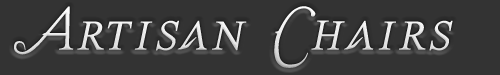
<style>
.page{position:relative;width:500px;height:75px;background:#333333}
.page>*{position:absolute;margin:0}
.t1{font:48px "TheLastFontI'mWastingOnYou-Italic";letter-spacing:0.04em;color:#e7e7e7;font-weight:bold}
</style>
<div class="page">
<p class="t1" style="left:14px;top:6px;width:439px;height:62px">Artisan  Chairs</p>
</div>
